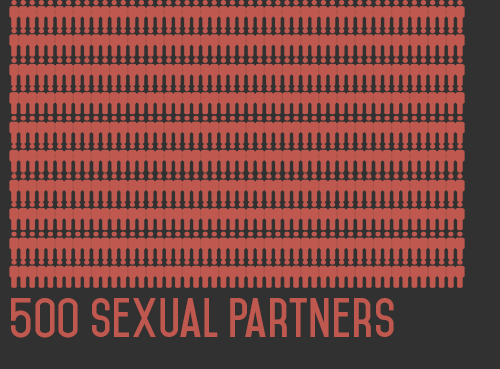
<style>
.page{position:relative;width:500px;height:369px;background:#bf584e}
.page>*{position:absolute;margin:0}
.t1{font:48px "Mohave-Bold";color:#bf584e}
</style>
<div class="page">
<p class="t1" style="left:11px;top:298px;width:383px;height:40px">5oo sexual Partners</p>
</div>
